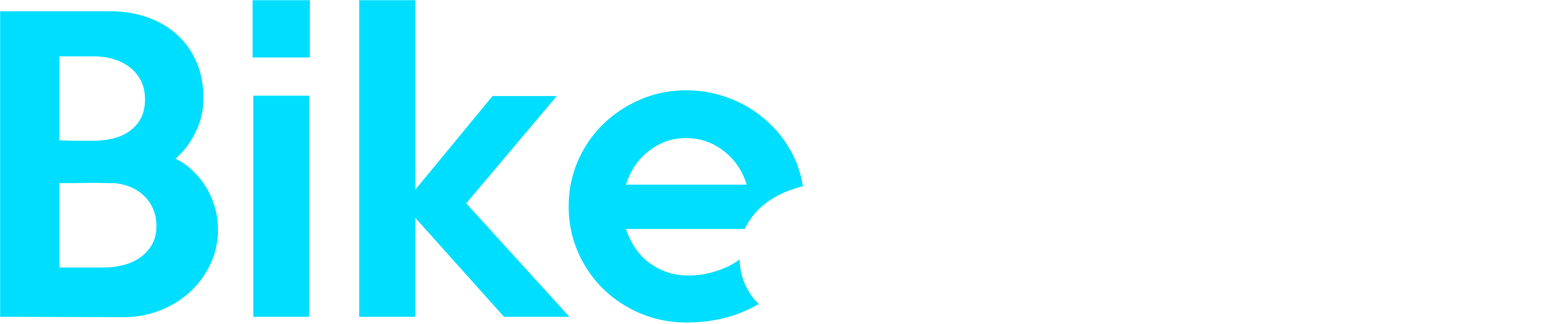
<style>
.page{position:relative;width:1568px;height:324px;background:#ffffff}
.page>*{position:absolute;margin:0}
.t1{font:381.9px "KeepCalm-Medium";color:#00deff}
</style>
<div class="page">
<p class="t1" style="left:0px;top:0px;width:805px;height:323px">Bike</p>
<p class="t1" style="left:0px;top:0px;width:805px;height:323px">Bike</p>
</div>
